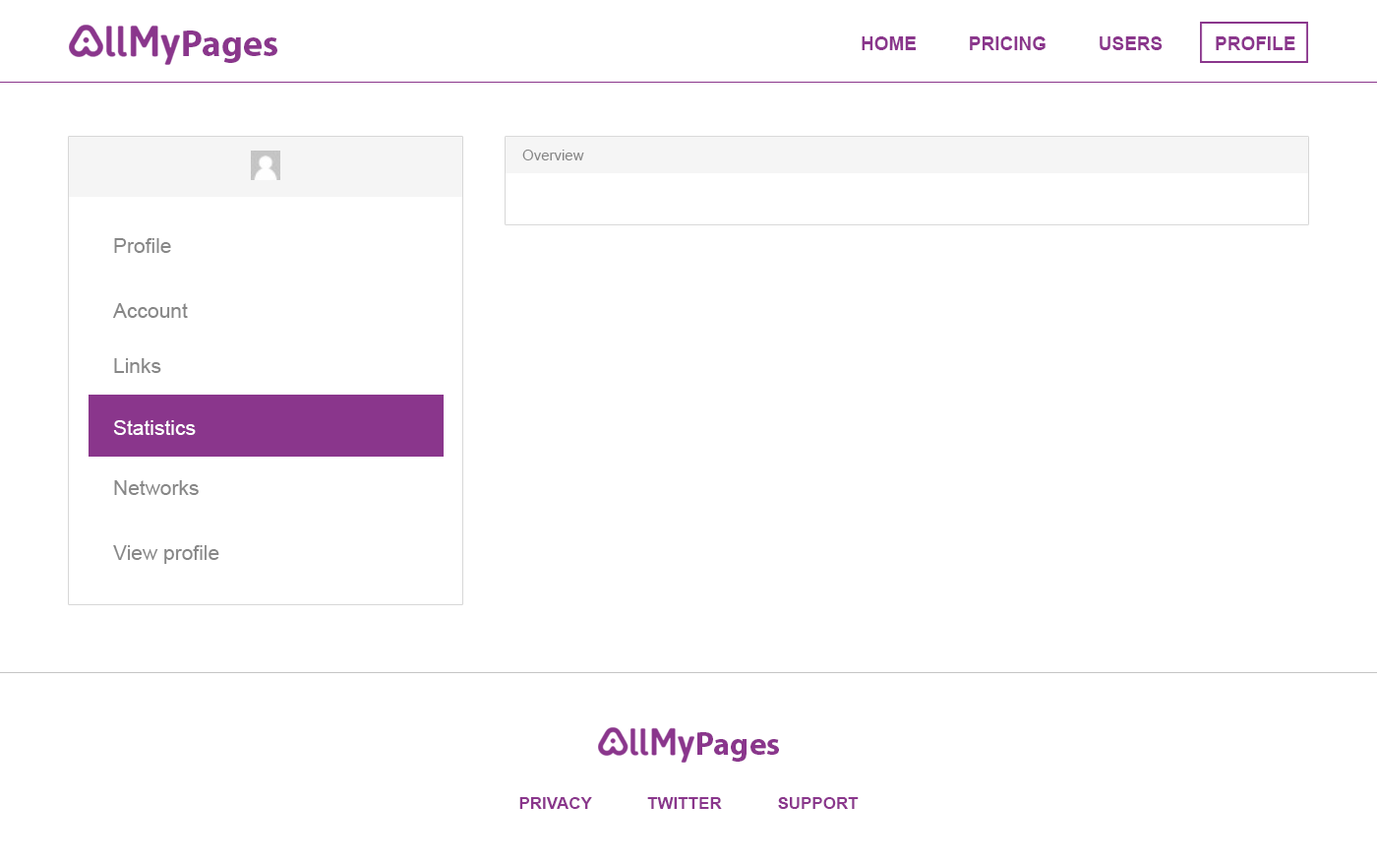
<style>
.page{position:relative;width:1377px;height:866px;background:#ffffff}
.page>*{position:absolute;margin:0}
.t1{font:37.2px "MyriadPro-Bold";color:#8a368c}
.t2{font:18.7px "Arial-BoldMT";color:#8a368c}
.t3{font:14.8px "ArialMT";color:#848484}
.t4{font:20.7px "ArialMT";color:#878787}
.t5{font:20.7px "ArialMT";color:#ffffff}
.t6{font:32.6px "MyriadPro-Bold";color:#8a368c}
.t7{font:16.7px "Arial-BoldMT";color:#8a368c}
</style>
<div class="page">
<p class="t1" style="left:183px;top:30px;width:94px;height:33px">Pages</p>
<p class="t2" style="left:862px;top:36px;width:434px;height:14px">HOME          PRICING          USERS          PROFILE</p>
<p class="t3" style="left:522px;top:150px;width:62px;height:10px">Overview</p>
<p class="t4" style="left:114px;top:238px;width:57px;height:15px">Profile</p>
<p class="t4" style="left:113px;top:303px;width:75px;height:15px">Account</p>
<p class="t4" style="left:114px;top:358px;width:47px;height:15px">Links</p>
<p class="t5" style="left:113px;top:420px;width:83px;height:15px">Statistics</p>
<p class="t4" style="left:114px;top:480px;width:85px;height:15px">Networks</p>
<p class="t4" style="left:113px;top:545px;width:106px;height:19px">View profile</p>
<p class="t6" style="left:698px;top:732px;width:81px;height:29px">Pages</p>
<p class="t7" style="left:519px;top:797px;width:340px;height:12px">PRIVACY            TWITTER            SUPPORT</p>
</div>
